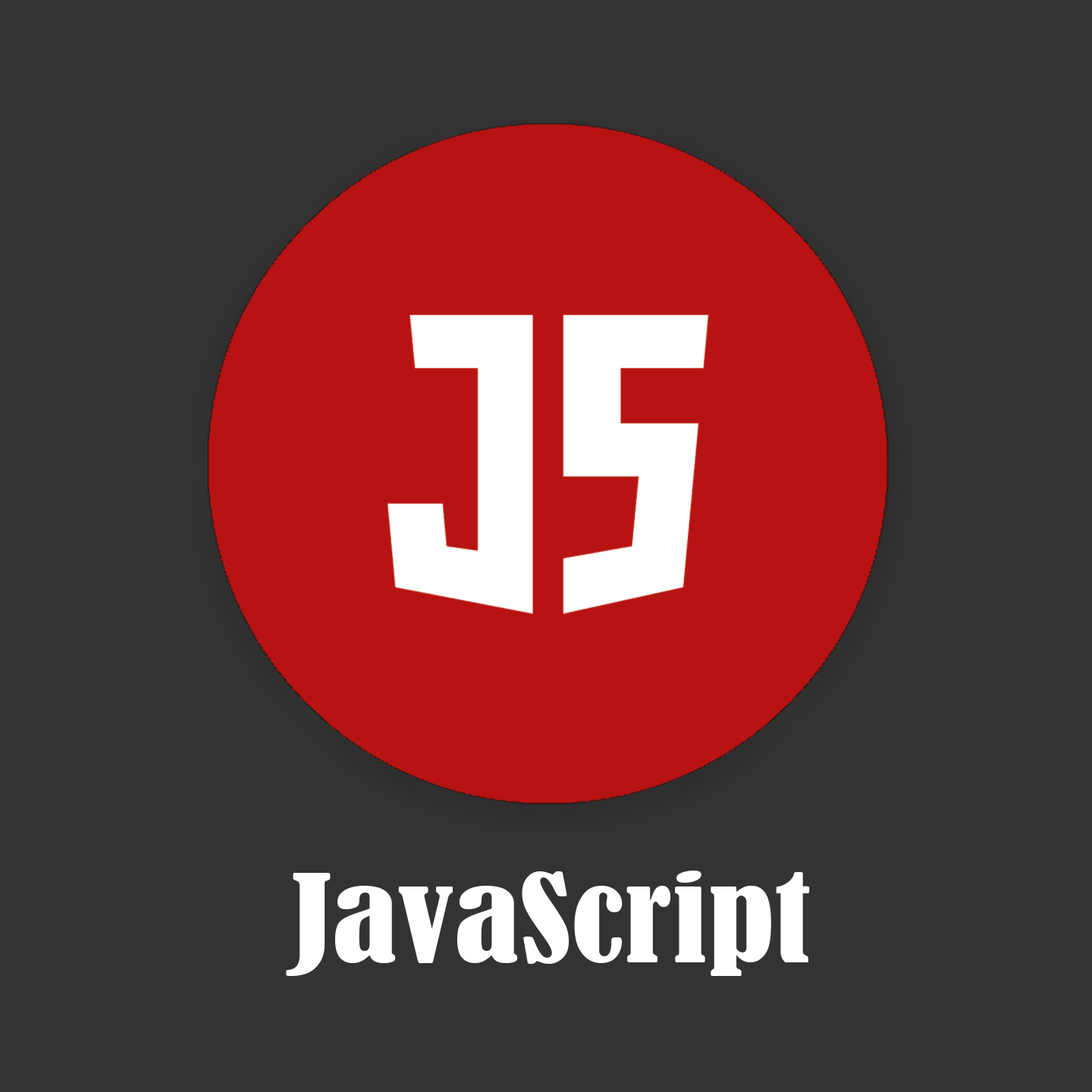
<style>
.page{position:relative;width:1092px;height:1092px;background:#333333}
.page>*{position:absolute;margin:0}
.t1{font:113.5px "BernardMT-Condensed";color:#ffffff;scale:1.2 1}
</style>
<div class="page">
<p class="t1" style="left:286px;top:871px;width:524px;height:105px">JavaScript</p>
</div>
